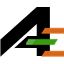
<style>
.page{position:relative;width:64px;height:64px;background:#ffffff}
.page>*{position:absolute;margin:0}
.t1{font:66px "New_Zelek";color:#000000}
</style>
<div class="page">
<p class="t1" style="left:0px;top:7px;width:50px;height:50px">A</p>
</div>
